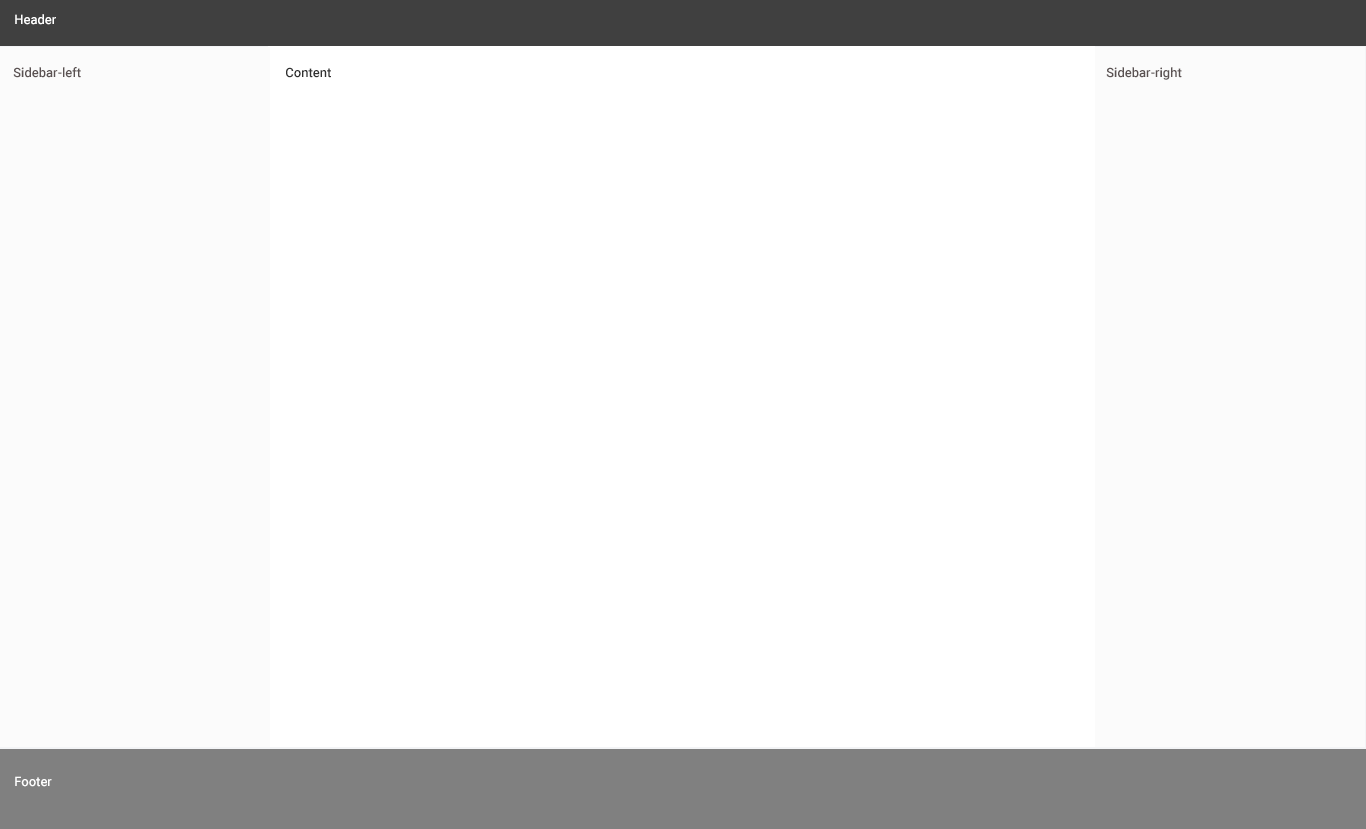
<style>
.page{position:relative;width:1366px;height:829px;background:#ffffff}
.page>*{position:absolute;margin:0}
.t1{font:13px "Roboto-Medium";color:#ffffff}
.t2{font:13px "Roboto-Medium";color:#5b5252}
.t3{font:13px "Roboto-Medium";color:#303030}
</style>
<div class="page">
<p class="t1" style="left:15px;top:14px;width:41px;height:11px">Header</p>
<p class="t2" style="left:13px;top:67px;width:68px;height:11px">Sidebar-left</p>
<p class="t3" style="left:286px;top:67px;width:45px;height:11px">Content</p>
<p class="t2" style="left:1106px;top:67px;width:76px;height:13px">Sidebar-right</p>
<p class="t1" style="left:15px;top:776px;width:37px;height:11px">Footer</p>
</div>
